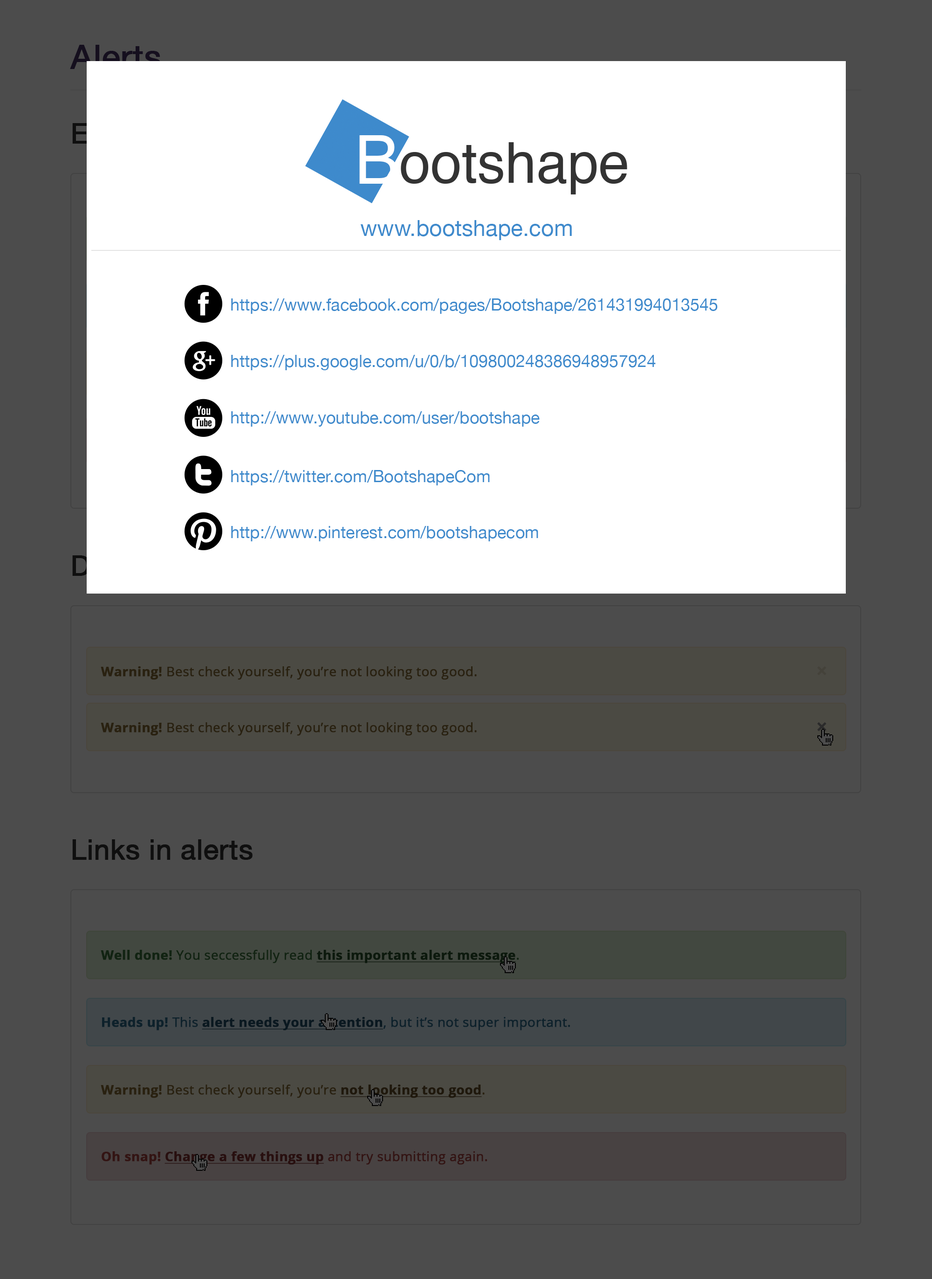
<style>
.page{position:relative;width:932px;height:1279px;background:#4c4c4c}
.page>*{position:absolute;margin:0}
.t1{font:22.4px "HelveticaNeue";color:#3e8acc}
.t2{font:16.8px "HelveticaNeue";color:#3e8acc}
.t3{font:13.1px "OpenSans";color:#292110;font-weight:bold}
.t4{font:13.1px "OpenSans-Bold";color:#292110;font-weight:bold}
.t5{font:28px "HelveticaNeue";color:#0f0f0f;font-weight:bold}
.t6{font:13.1px "OpenSans-Bold";color:#0c190d;font-weight:bold;text-decoration:underline}
.t7{font:13.1px "OpenSans-Bold";color:#0c190d;font-weight:bold}
.t8{font:13.1px "OpenSans";color:#0c190d;font-weight:bold}
.t9{font:13.1px "OpenSans";color:#0d212b;font-weight:bold}
.t10{font:13.1px "OpenSans-Bold";color:#0d212b;font-weight:bold}
.t11{font:13.1px "OpenSans-Bold";color:#0d212b;font-weight:bold;text-decoration:underline}
.t12{font:13.1px "OpenSans-Bold";color:#292110;font-weight:bold;text-decoration:underline}
.t13{font:13.1px "OpenSans";color:#331413;font-weight:bold}
.t14{font:13.1px "OpenSans-Bold";color:#331413;font-weight:bold}
.t15{font:13.1px "OpenSans-Bold";color:#331413;font-weight:bold;text-decoration:underline}
</style>
<div class="page">
<p class="t1" style="left:360px;top:220px;width:212px;height:20px">www.bootshape.com</p>
<p class="t2" style="left:231px;top:298px;width:487px;height:16px">https://www.facebook.com/pages/Bootshape/261431994013545</p>
<p class="t2" style="left:231px;top:355px;width:425px;height:15px">https://plus.google.com/u/0/b/109800248386948957924</p>
<p class="t2" style="left:231px;top:411px;width:309px;height:16px">http://www.youtube.com/user/bootshape</p>
<p class="t2" style="left:231px;top:470px;width:259px;height:15px">https://twitter.com/BootshapeCom</p>
<p class="t2" style="left:231px;top:526px;width:307px;height:15px">http://www.pinterest.com/bootshapecom</p>
<p class="t3" style="left:101px;top:666px;width:376px;height:14px"><span class="t4">Warning! </span>Best check yourself, you’re not looking too good.</p>
<p class="t3" style="left:101px;top:722px;width:376px;height:14px"><span class="t4">Warning! </span>Best check yourself, you’re not looking too good.</p>
<p class="t5" style="left:72px;top:839px;width:181px;height:21px">Links in alerts</p>
<p class="t6" style="left:101px;top:950px;width:418px;height:13px"><span class="t7">Well done! </span><span class="t8">You seccessfully read </span>this important alert message<span class="t8">.</span></p>
<p class="t9" style="left:102px;top:1017px;width:469px;height:13px"><span class="t10">Heads up! </span>This <span class="t11">alert needs your attention</span>, but it’s not super important.</p>
<p class="t3" style="left:101px;top:1084px;width:384px;height:14px"><span class="t4">Warning! </span>Best check yourself, you’re <span class="t12">not looking too good</span>.</p>
<p class="t13" style="left:102px;top:1151px;width:386px;height:14px"><span class="t14">Oh snap! </span><span class="t15">Change a few things up </span>and try submitting again.</p>
</div>
